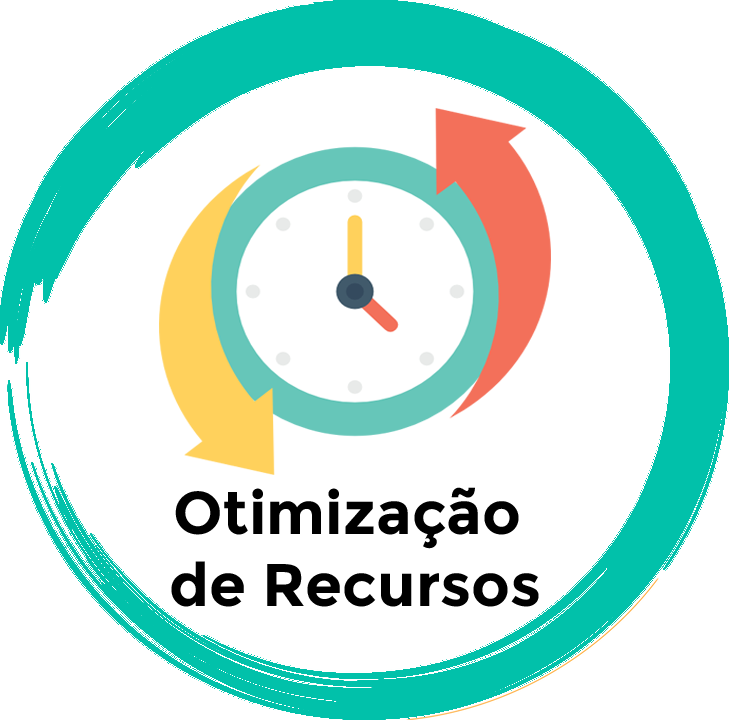
<style>
.page{position:relative;width:729px;height:720px;background:#ffffff}
.page>*{position:absolute;margin:0}
.t1{font:60px "Montserrat-Bold";color:#000000}
</style>
<div class="page">
<p class="t1" style="left:171px;top:487px;width:368px;height:120px;text-align:center">Otimização <br>de Recursos</p>
</div>
